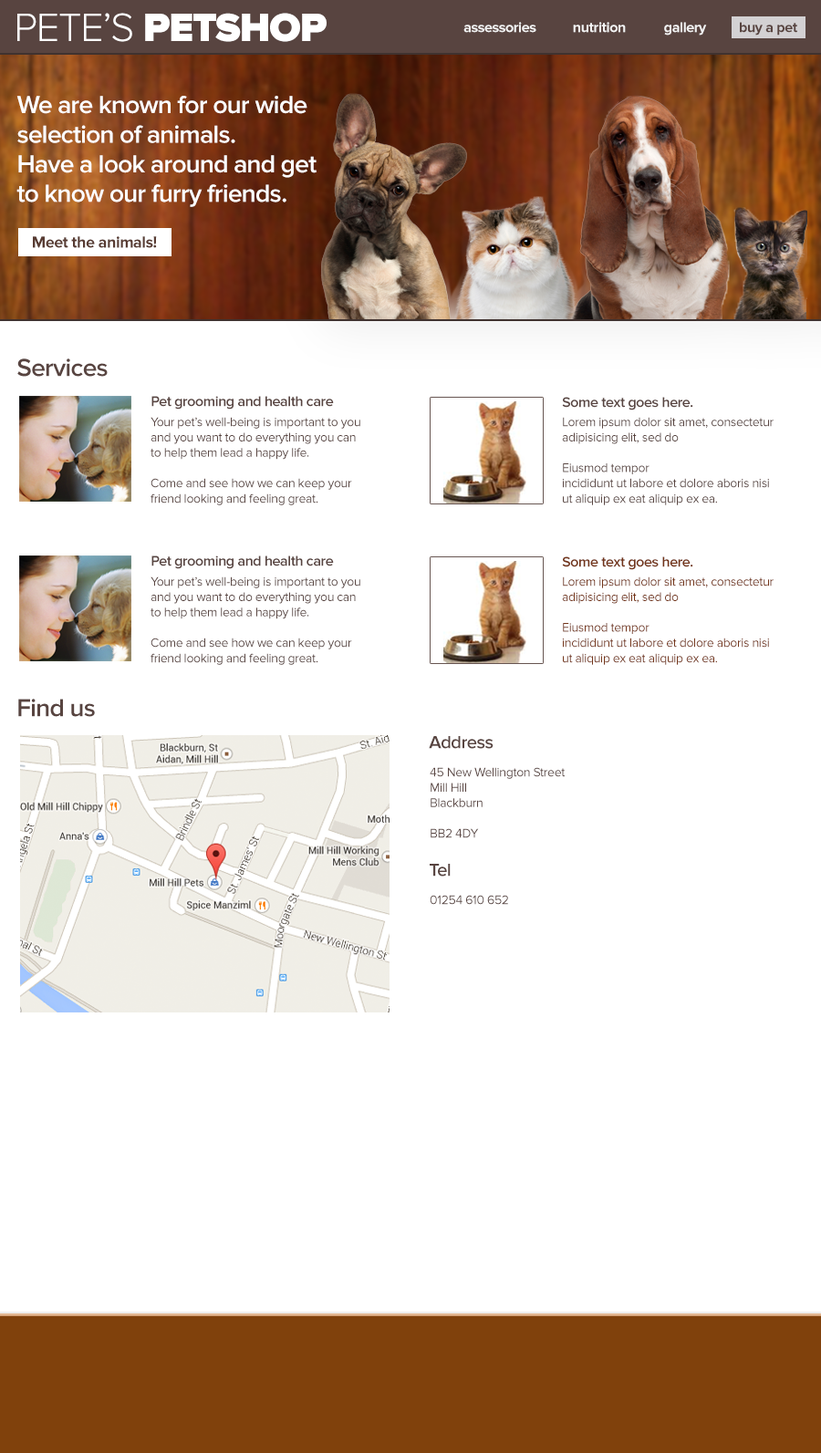
<style>
.page{position:relative;width:821px;height:1453px;background:#ffffff}
.page>*{position:absolute;margin:0}
.t1{font:41px "ProximaNova-Black";letter-spacing:-0.025em;color:#ffffff}
.t2{font:41px "ProximaNova-Light";letter-spacing:-0.025em;color:#ffffff}
.t3{font:14.6px "ProximaNova-Bold";letter-spacing:-0.025em;color:#f2f2f2}
.t4{font:14.6px "ProximaNova-Bold";letter-spacing:-0.025em;color:#584440}
.t5{font:25.5px/29.6px "ProximaNova-Semibold";letter-spacing:-0.025em;color:#fefefe}
.t6{font:16.4px "ProximaNova-Bold";letter-spacing:-0.025em;color:#583b32}
.t7{font:25.5px "ProximaNova-Semibold";letter-spacing:-0.025em;color:#584440}
.t8{font:14.6px "ProximaNova-Semibold";letter-spacing:-0.025em;color:#584440}
.t9{font:12.8px "ProximaNova-Regular";letter-spacing:-0.025em;color:#584440}
.t10{font:14.6px "ProximaNova-Semibold";letter-spacing:-0.025em;color:#733418}
.t11{font:12.8px "ProximaNova-Regular";letter-spacing:-0.025em;color:#733418}
.t12{font:18.2px "ProximaNova-Semibold";letter-spacing:-0.025em;color:#584440}
</style>
<div class="page">
<p class="t1" style="left:17px;top:13px;width:309px;height:29px"><span class="t2">PETE’S</span> PETSHOP</p>
<p class="t3" style="left:463px;top:22px;width:73px;height:11px">assessories</p>
<p class="t3" style="left:573px;top:22px;width:53px;height:11px">nutrition</p>
<p class="t3" style="left:664px;top:22px;width:43px;height:14px">gallery</p>
<p class="t4" style="left:740px;top:22px;width:57px;height:14px">buy a pet</p>
<p class="t5" style="left:16px;top:96px;width:300px;height:111px">We are known for our wide<br>selection of animals. <br>Have a look around and get <br>to know our furry friends.</p>
<p class="t6" style="left:33px;top:236px;width:124px;height:12px">Meet the animals!</p>
<p class="t7" style="left:17px;top:358px;width:91px;height:19px">Services</p>
<p class="t8" style="left:151px;top:396px;width:183px;height:13px">Pet grooming and health care</p>
<p class="t8" style="left:562px;top:397px;width:131px;height:13px">Some text goes here.</p>
<p class="t9" style="left:150px;top:417px;width:210px;height:88px">Your pet’s well-being is important to you<br>and you want to do everything you can<br>to help them lead a happy life.<br><br>Come and see how we can keep your<br>friend looking and feeling great.</p>
<p class="t9" style="left:562px;top:417px;width:211px;height:88px">Lorem ipsum dolor sit amet, consectetur <br>adipisicing elit, sed do<br><br>Eiusmod tempor <br>incididunt ut labore et dolore aboris nisi <br>ut aliquip ex eat aliquip ex ea.</p>
<p class="t8" style="left:151px;top:555px;width:183px;height:14px">Pet grooming and health care</p>
<p class="t10" style="left:562px;top:556px;width:131px;height:14px">Some text goes here.</p>
<p class="t9" style="left:150px;top:576px;width:210px;height:89px">Your pet’s well-being is important to you<br>and you want to do everything you can<br>to help them lead a happy life.<br><br>Come and see how we can keep your<br>friend looking and feeling great.</p>
<p class="t11" style="left:562px;top:576px;width:211px;height:89px">Lorem ipsum dolor sit amet, consectetur <br>adipisicing elit, sed do<br><br>Eiusmod tempor <br>incididunt ut labore et dolore aboris nisi <br>ut aliquip ex eat aliquip ex ea.</p>
<p class="t7" style="left:18px;top:699px;width:77px;height:18px">Find us</p>
<p class="t12" style="left:429px;top:736px;width:64px;height:13px">Address</p>
<p class="t9" style="left:430px;top:767px;width:135px;height:71px">45 New Wellington Street<br>Mill Hill<br>Blackburn<br><br>BB2 4DY</p>
<p class="t12" style="left:430px;top:864px;width:21px;height:12px">Tel</p>
<p class="t9" style="left:430px;top:895px;width:78px;height:10px">01254 610 652</p>
</div>
